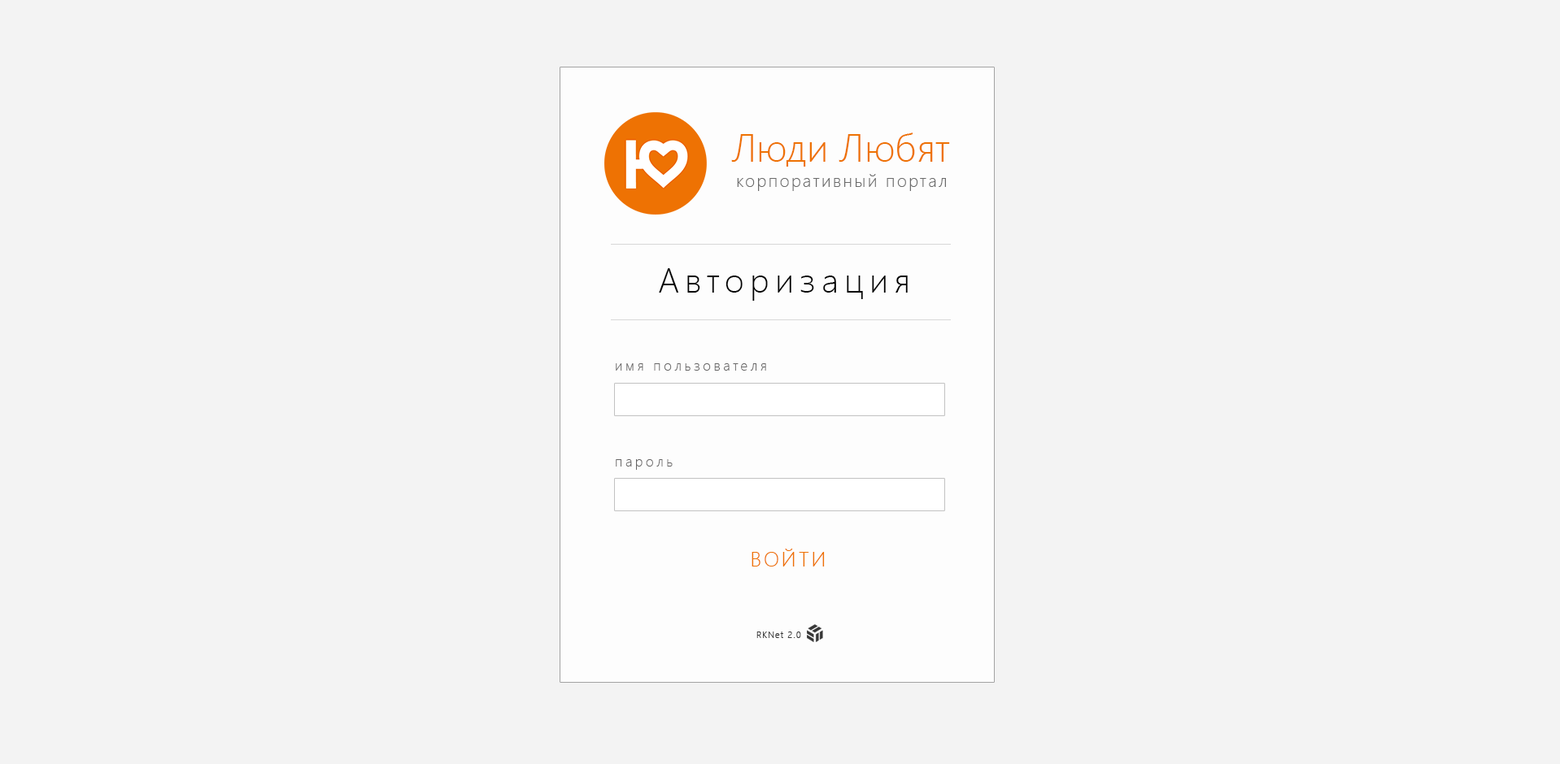
<style>
.page{position:relative;width:1560px;height:764px;background:#f3f3f3}
.page>*{position:absolute;margin:0}
.t1{font:39.1px "SegoeUI-Light";color:#ee7203}
.t2{font:17px "SegoeUI-Light";letter-spacing:0.12em;color:#6b6b6b}
.t3{font:33.9px "SegoeUI-Light";letter-spacing:0.18em;color:#000000}
.t4{font:14px "SegoeUI-Light";letter-spacing:0.2em;color:#666565}
.t5{font:20.3px "SegoeUI-Light";letter-spacing:0.12em;color:#ee7203}
.t6{font:8.7px "SegoeUI-Light";letter-spacing:0.12em;color:#373737}
</style>
<div class="page">
<p class="t1" style="left:731px;top:133px;width:219px;height:34px">Люди Любят</p>
<p class="t2" style="left:737px;top:174px;width:209px;height:17px">корпоративный портал</p>
<p class="t3" style="left:659px;top:268px;width:249px;height:33px">Авторизация</p>
<p class="t4" style="left:616px;top:364px;width:150px;height:7px">имя пользователя</p>
<p class="t4" style="left:616px;top:459px;width:57px;height:11px">пароль</p>
<p class="t5" style="left:751px;top:549px;width:74px;height:18px">ВОЙТИ</p>
<p class="t6" style="left:756px;top:632px;width:45px;height:6px">RKNet 2.0</p>
</div>
